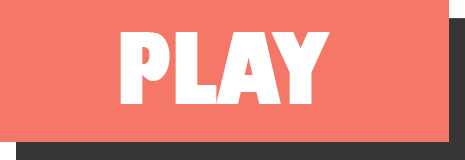
<style>
.page{position:relative;width:465px;height:160px;background:#f57767}
.page>*{position:absolute;margin:0}
.t1{font:95.7px "GillSans-UltraBoldCondensed";color:#ffffff}
</style>
<div class="page">
<p class="t1" style="left:120px;top:32px;width:210px;height:72px">PLAY</p>
</div>
